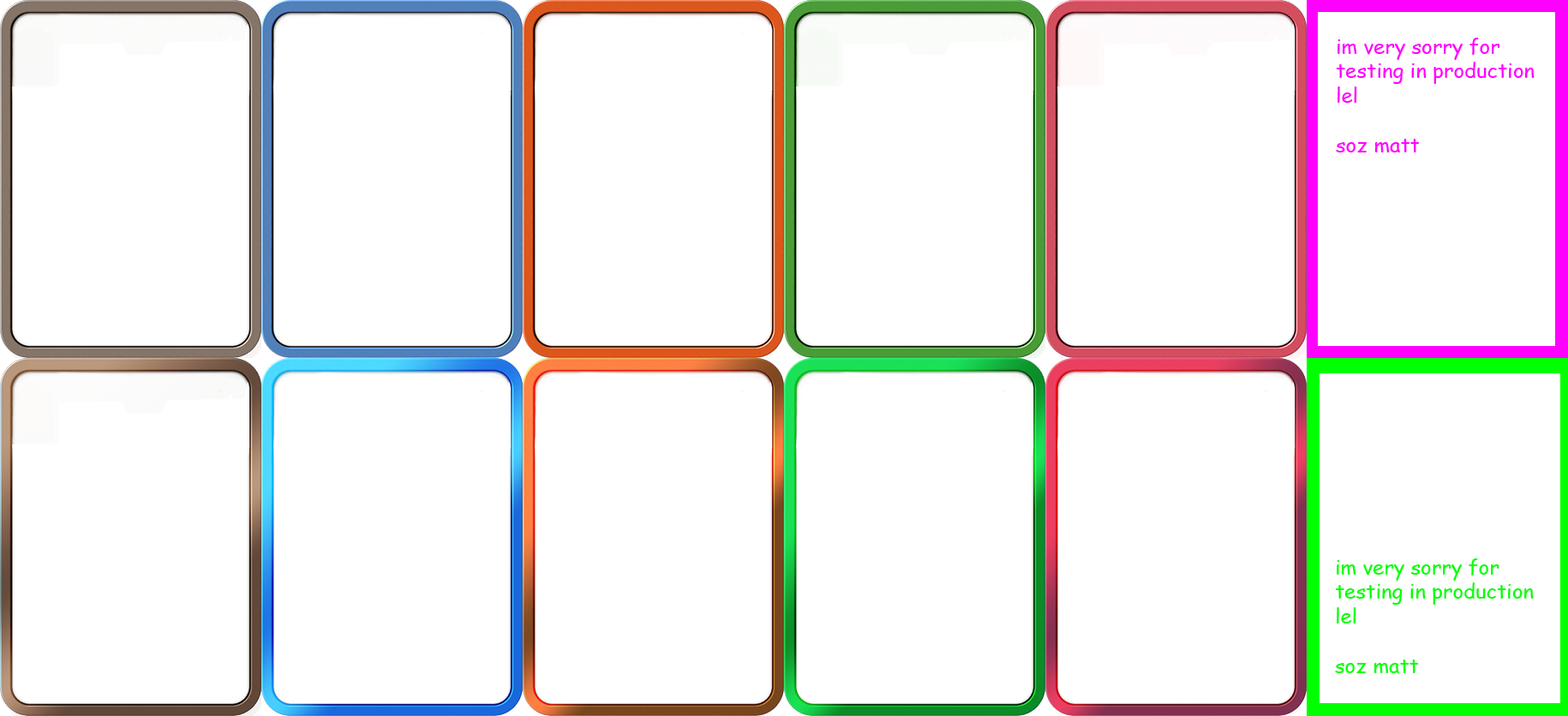
<style>
.page{position:relative;width:1568px;height:716px;background:#ffffff}
.page>*{position:absolute;margin:0}
.t1{font:20.6px "ComicSansMS";color:#ff00ff}
.t2{font:20.6px "ComicSansMS";color:#00ff00}
</style>
<div class="page">
<p class="t1" style="left:1336px;top:38px;width:199px;height:115px">im very sorry for<br>testing in production<br>lel<br><br>soz matt</p>
<p class="t2" style="left:1335px;top:559px;width:199px;height:114px">im very sorry for<br>testing in production<br>lel<br><br>soz matt</p>
</div>
